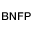
<style>
.page{position:relative;width:32px;height:32px;background:#ffffff}
.page>*{position:absolute;margin:0}
.t1{font:11px "HelveticaNeueLTPro-Md";color:#000000}
</style>
<div class="page">
<p class="t1" style="left:2px;top:12px;width:29px;height:8px">BNFP</p>
</div>
